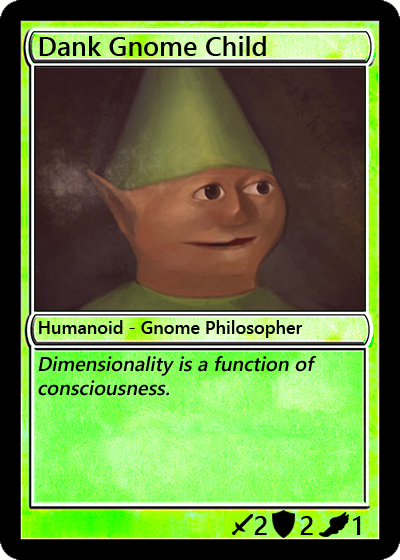
<style>
.page{position:relative;width:400px;height:560px}
.page>*{position:absolute;margin:0}
.t1{font:27px "YuGothicUI-Semibold";color:#000000}
.t2{font:18px "YuGothicUI-Semibold";color:#000000}
.t3{font:20px "YuGothicUI-Semibold";color:#000000;font-style:italic}
</style>
<div class="page">
<p class="t1" style="left:39px;top:36px;width:227px;height:20px">Dank Gnome Child</p>
<p class="t2" style="left:39px;top:320px;width:264px;height:18px">Humanoid - Gnome Philosopher</p>
<p class="t3" style="left:38px;top:356px;width:278px;height:40px">Dimensionality is a function of <br>consciousness.</p>
<p class="t1" style="left:254px;top:516px;width:13px;height:19px">2</p>
<p class="t1" style="left:300px;top:516px;width:13px;height:19px">2</p>
<p class="t1" style="left:353px;top:516px;width:8px;height:19px">1</p>
</div>
